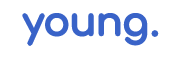
<style>
.page{position:relative;width:180px;height:58px;background:#ffffff}
.page>*{position:absolute;margin:0}
.t1{font:40px "Comfortaa-Bold";letter-spacing:-0.05em;color:#3963c8;font-weight:bold}
.t2{font:40px "Comfortaa-Bold";color:#3963c8;font-weight:bold}
</style>
<div class="page">
<p class="t1" style="left:22px;top:13px;width:137px;height:33px">youn<span class="t2">g.</span></p>
</div>
